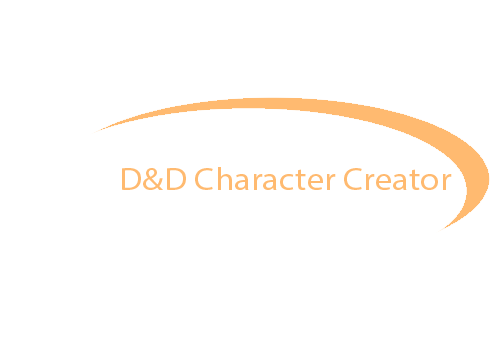
<style>
.page{position:relative;width:504px;height:360px;background:#ffffff}
.page>*{position:absolute;margin:0}
.t1{font:32px "MyriadPro-Regular";color:#ffba70;scale:1.1 1}
</style>
<div class="page">
<p class="t1" style="left:122px;top:167px;width:330px;height:23px">D&amp;D Character Creator</p>
</div>
